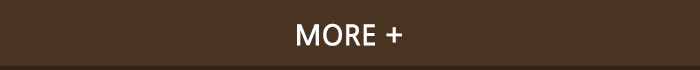
<style>
.page{position:relative;width:700px;height:70px;background:#493422}
.page>*{position:absolute;margin:0}
.t1{font:28px "NanumGothicBold";color:#ffffff}
</style>
<div class="page">
<p class="t1" style="left:297px;top:23px;width:105px;height:23px">MORE +</p>
</div>
